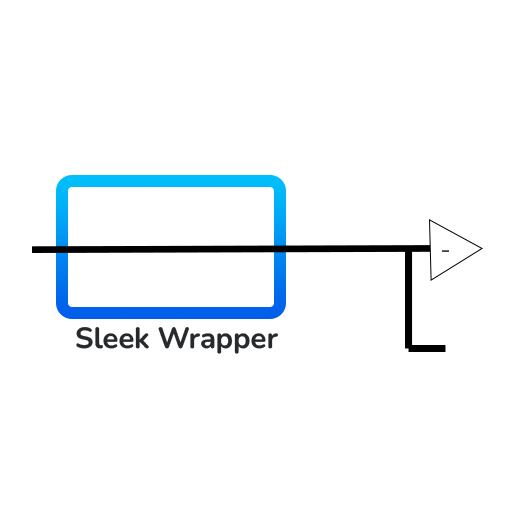
<style>
.page{position:relative;width:512px;height:512px;background:#ffffff}
.page>*{position:absolute;margin:0}
.t1{font:29.2px "Nunito-Bold";color:#272a2c;font-weight:bold}
</style>
<div class="page">
<p class="t1" style="left:76px;top:327px;width:202px;height:27px">Sleek Wrapper</p>
</div>
